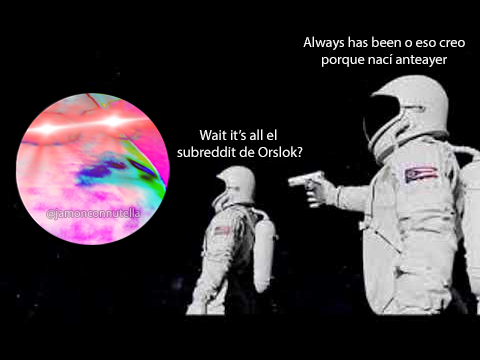
<style>
.page{position:relative;width:480px;height:360px;background:#000000}
.page>*{position:absolute;margin:0}
.t1{font:14.3px "MyriadPro-Regular";color:#ffffff}
.t2{font:14.7px "MyriadPro-Regular";color:#ffffff}
.t3{font:12px "MyriadPro-Regular"}
</style>
<div class="page">
<p class="t1" style="left:303px;top:36px;width:162px;height:31px;text-align:center">Always has been o eso creo<br>porque nací anteayer</p>
<p class="t2" style="left:177px;top:129px;width:126px;height:28px;text-align:center">Wait it’s all el <br>subreddit de Orslok?</p>
<p class="t3" style="left:47px;top:208px;width:93px;height:12px">@jamonconnutella</p>
</div>
